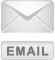
<style>
.page{position:relative;width:55px;height:60px}
.page>*{position:absolute;margin:0}
.t1{font:12px "Arial-BoldMT";letter-spacing:0.1em;color:#777777}
</style>
<div class="page">
<p class="t1" style="left:7px;top:46px;width:42px;height:10px">EMAIL</p>
</div>
